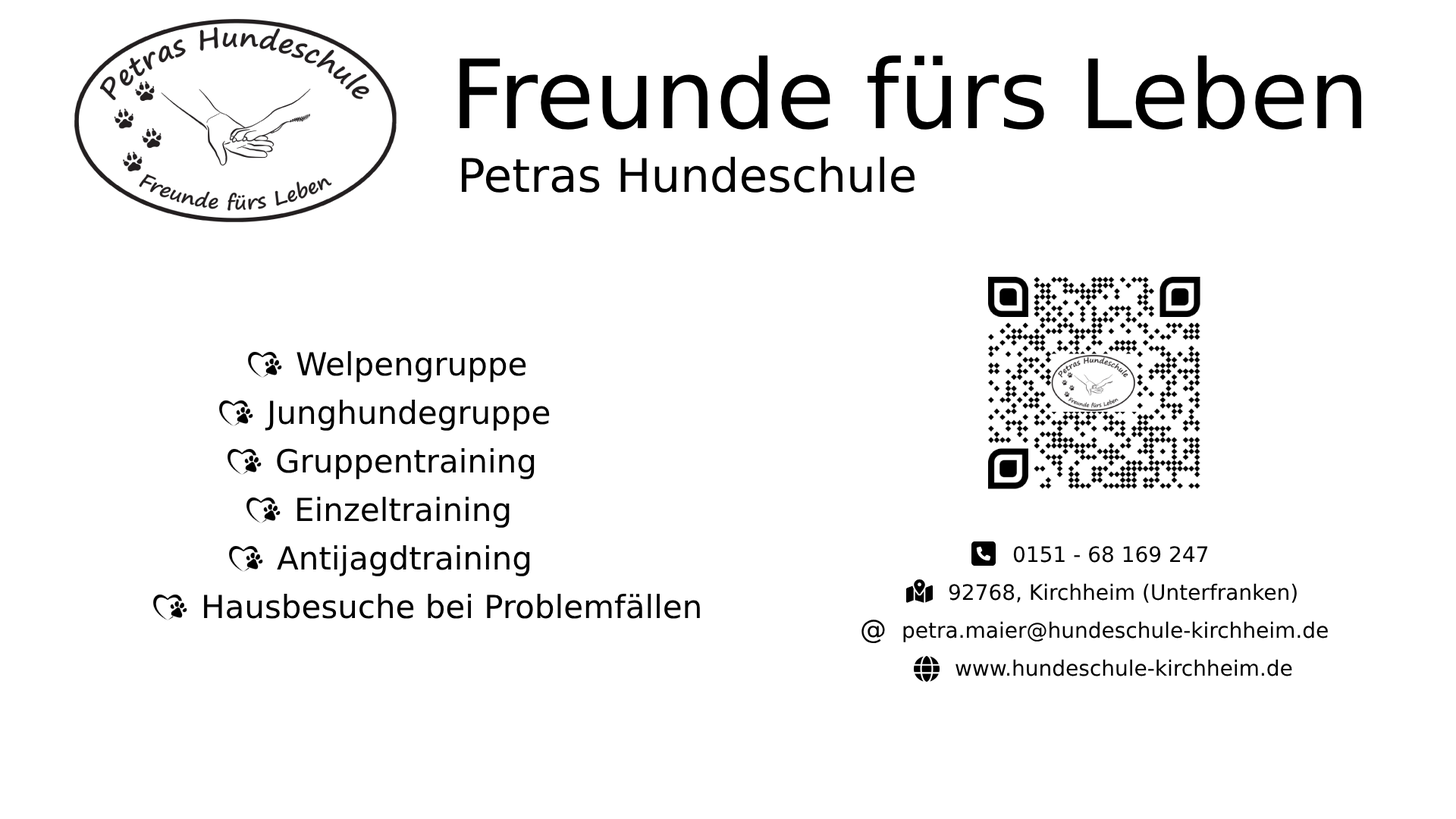
<style>
.page{position:relative;width:1456px;height:819px;background:#ffffff}
.page>*{position:absolute;margin:0}
.t1{font:95.5px "DejaVuSans";color:#000000}
.t2{font:46.3px "DejaVuSans";color:#000000}
.t3{font:31.8px "DejaVuSans";color:#000000}
.t4{font:21.2px "DejaVuSans";color:#000000}
.t5{font:26.5px "DejaVuSans";color:#000000}
</style>
<div class="page">
<p class="t1" style="left:460px;top:55px;width:901px;height:75px">Freunde fürs Leben</p>
<p class="t2" style="left:461px;top:156px;width:454px;height:37px">Petras Hundeschule</p>
<p class="t3" style="left:297px;top:351px;width:229px;height:31px">Welpengruppe</p>
<p class="t3" style="left:265px;top:400px;width:285px;height:31px">Junghundegruppe</p>
<p class="t3" style="left:277px;top:448px;width:258px;height:31px">Gruppentraining</p>
<p class="t3" style="left:297px;top:497px;width:213px;height:31px">Einzeltraining</p>
<p class="t3" style="left:277px;top:545px;width:253px;height:31px">Antijagdtraining</p>
<p class="t4" style="left:1013px;top:546px;width:195px;height:17px">0151 - 68 169 247</p>
<p class="t3" style="left:204px;top:594px;width:496px;height:25px">Hausbesuche bei Problemfällen</p>
<p class="t4" style="left:949px;top:583px;width:348px;height:20px">92768, Kirchheim (Unterfranken)</p>
<p class="t5" style="left:861px;top:620px;width:24px;height:24px">@</p>
<p class="t4" style="left:903px;top:621px;width:425px;height:21px">petra.maier@hundeschule-kirchheim.de</p>
<p class="t4" style="left:955px;top:659px;width:337px;height:17px">www.hundeschule-kirchheim.de</p>
</div>
